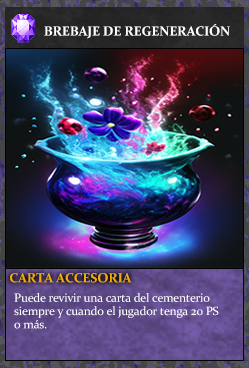
<style>
.page{position:relative;width:249px;height:368px}
.page>*{position:absolute;margin:0}
.t1{font:13.3px "Constantia-Bold";letter-spacing:-0.02em;color:#ffffff}
.t2{font:13.3px "Constantia-Bold";letter-spacing:-0.02em;color:#f2ac05}
.t3{font:12px/13.3px "Constantia";letter-spacing:-0.02em;color:#ffffff}
</style>
<div class="page">
<p class="t1" style="left:44px;top:24px;width:186px;height:15px">BREBAJE DE REGENERACIÓN</p>
<p class="t2" style="left:10px;top:273px;width:122px;height:10px">CARTA ACCESORIA</p>
<p class="t3" style="left:14px;top:293px;width:205px;height:36px">Puede revivir una carta del cementerio<br>siempre y cuando el jugador tenga 20 PS<br>o más.</p>
</div>
